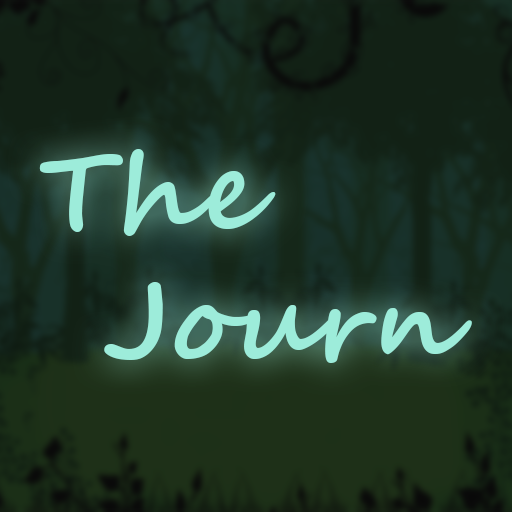
<style>
.page{position:relative;width:512px;height:512px}
.page>*{position:absolute;margin:0}
.t1{font:108.3px "SegoeScript-Bold";color:#9decda}
</style>
<div class="page">
<p class="t1" style="left:39px;top:149px;width:433px;height:214px;text-align:center">The<br>      Journ</p>
</div>
